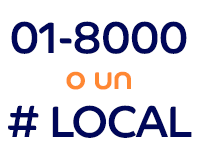
<style>
.page{position:relative;width:200px;height:160px;background:#ffffff}
.page>*{position:absolute;margin:0}
.t1{font:44.4px "CoHeadline-Regular";letter-spacing:-0.02em;color:#000759}
.t2{font:33.3px "CoHeadline-Regular";letter-spacing:-0.02em;color:#ff8833}
</style>
<div class="page">
<p class="t1" style="left:8px;top:21px;width:184px;height:117px;text-align:center">01-8000<br><span class="t2">o un<br></span># LOCAL</p>
</div>
